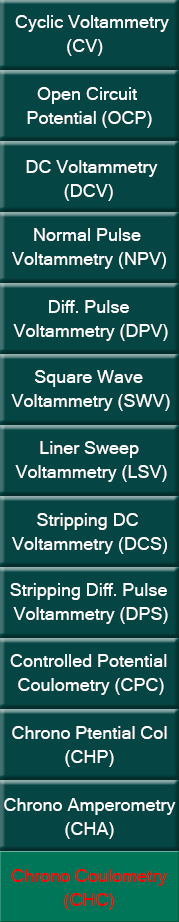
<style>
.page{position:relative;width:179px;height:922px;background:#054543}
.page>*{position:absolute;margin:0}
.t1{font:18px/24px "MicrosoftSansSerif";color:#ffffff}
.t2{font:18px/24px "MicrosoftSansSerif";color:#ff0000}
</style>
<div class="page">
<p class="t1" style="left:15px;top:15px;width:154px;height:41px;text-align:center">Cyclic Voltammetry<br>       (CV)</p>
<p class="t1" style="left:27px;top:87px;width:125px;height:41px;text-align:center">Open Circuit <br>Potential (OCP)</p>
<p class="t1" style="left:26px;top:160px;width:132px;height:41px">DC Voltammetry<br>        (DCV)</p>
<p class="t1" style="left:12px;top:228px;width:154px;height:41px;text-align:center">Normal Pulse <br>Voltammetry (NPV)</p>
<p class="t1" style="left:13px;top:300px;width:155px;height:41px;text-align:center">Diff. Pulse <br>Voltammetry (DPV)</p>
<p class="t1" style="left:11px;top:370px;width:159px;height:41px;text-align:center">Square Wave <br>Voltammetry (SWV)</p>
<p class="t1" style="left:15px;top:441px;width:152px;height:41px;text-align:center">Liner Sweep <br>Voltammetry (LSV)</p>
<p class="t1" style="left:12px;top:513px;width:155px;height:41px;text-align:center">Stripping DC <br>Voltammetry (DCS)</p>
<p class="t1" style="left:10px;top:583px;width:158px;height:41px;text-align:center">Stripping Diff. Pulse <br>Voltammetry (DPS)</p>
<p class="t1" style="left:10px;top:654px;width:157px;height:41px;text-align:center">Controlled Potential <br>Coulometry (CPC)</p>
<p class="t1" style="left:12px;top:726px;width:155px;height:41px;text-align:center">Chrono Ptential Col<br>(CHP)</p>
<p class="t1" style="left:4px;top:798px;width:172px;height:41px;text-align:center">Chrono Amperometry<br>(CHA)</p>
<p class="t2" style="left:11px;top:869px;width:156px;height:41px;text-align:center">Chrono Coulometry<br>(CHC)</p>
</div>
